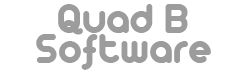
<style>
.page{position:relative;width:245px;height:70px;background:#ffffff}
.page>*{position:absolute;margin:0}
.t1{font:45px "Arista2.0";color:#9c9c9c}
</style>
<div class="page">
<p class="t1" style="left:58px;top:4px;width:130px;height:31px">Quad B</p>
<p class="t1" style="left:36px;top:34px;width:175px;height:36px">Software</p>
</div>
